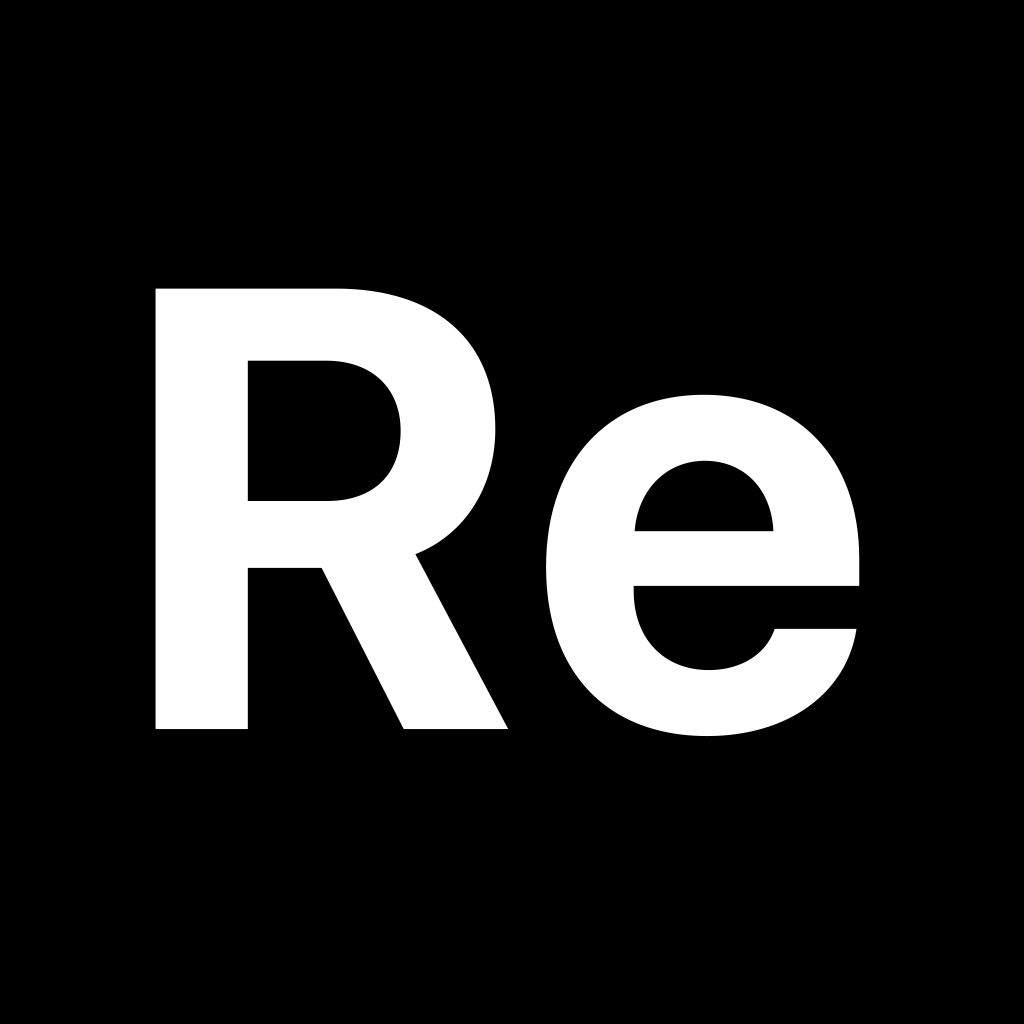
<style>
.page{position:relative;width:1024px;height:1024px;background:#000000}
.page>*{position:absolute;margin:0}
.t1{font:625px "SFProDisplay-Bold";letter-spacing:0.02em;color:#ffffff}
</style>
<div class="page">
<p class="t1" style="left:155px;top:288px;width:705px;height:449px">Re</p>
</div>
